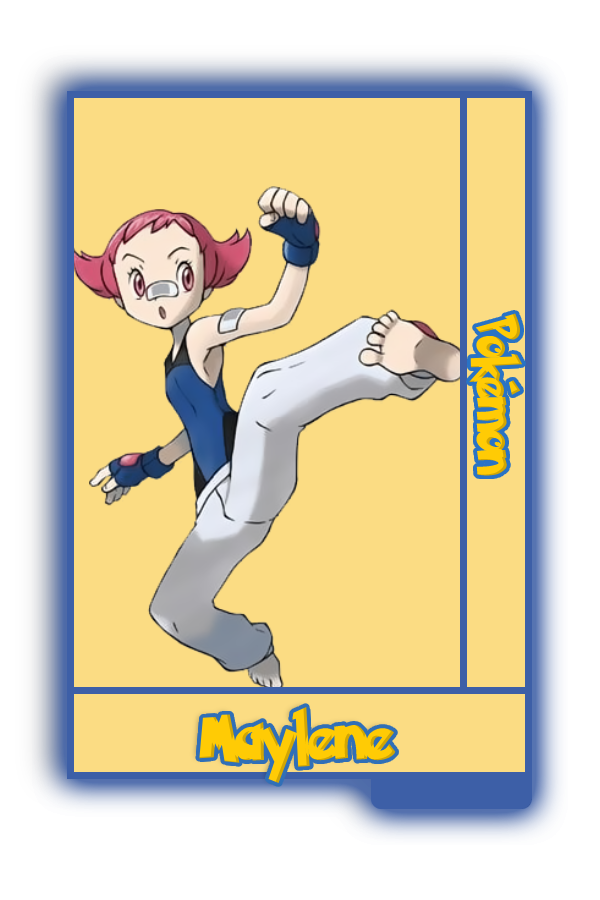
<style>
.page{position:relative;width:600px;height:900px;background:#fbdc83}
.page>*{position:absolute;margin:0}
.t1{font:48.8px "PokemonSolidNormal";color:#ffcb05;scale:0.8 1}
.t2{font:56.6px "PokemonSolidNormal";color:#ffcb05;scale:0.92 1}
</style>
<div class="page">
<p class="t1" style="left:469px;top:313px;width:54px;height:163px;rotate:90deg">Pokémon</p>
<p class="t2" style="left:199px;top:706px;width:197px;height:77px">Maylene</p>
</div>
